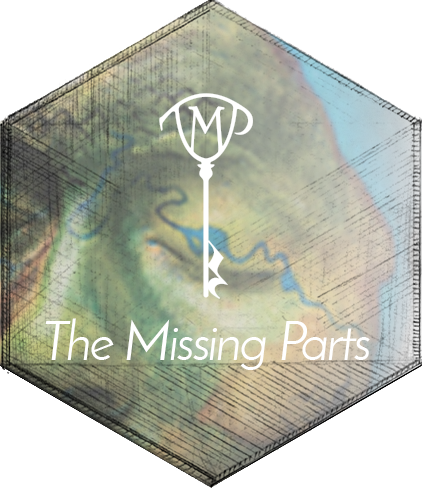
<style>
.page{position:relative;width:423px;height:488px;background:#ffffff}
.page>*{position:absolute;margin:0}
.t1{font:54px "JosefinSans";letter-spacing:-0.04em;color:#ffffff}
</style>
<div class="page">
<p class="t1" style="left:45px;top:318px;width:325px;height:52px">The Missing Parts</p>
</div>
